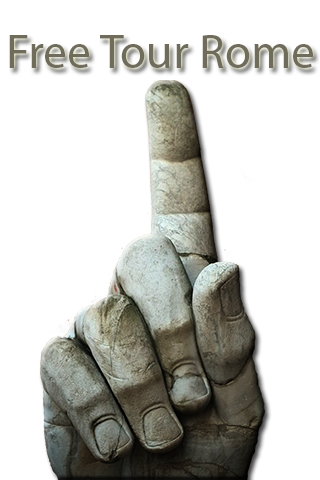
<style>
.page{position:relative;width:320px;height:480px;background:#ffffff}
.page>*{position:absolute;margin:0}
.t1{font:48px "MyriadPro-Regular";color:#6f6c5c}
</style>
<div class="page">
<p class="t1" style="left:9px;top:35px;width:304px;height:33px">Free Tour Rome</p>
</div>
